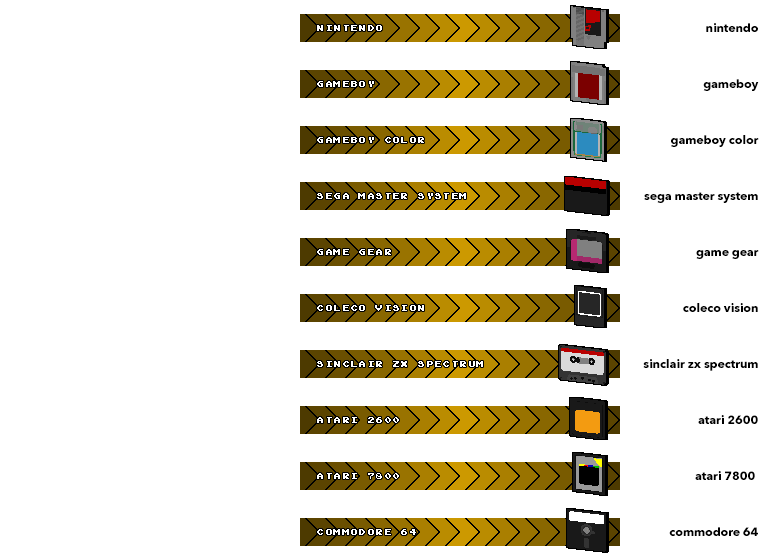
<style>
.page{position:relative;width:770px;height:560px;background:#ffffff}
.page>*{position:absolute;margin:0}
.t1{font:12px/56px "AvenirNext-Bold";color:#000000}
</style>
<div class="page">
<p class="t1" style="left:643px;top:23px;width:116px;height:513px;text-align:right">nintendo<br>gameboy<br>gameboy color<br>sega master system<br>game gear<br>coleco vision<br>sinclair zx spectrum<br>atari 2600<br>atari 7800 <br>commodore 64</p>
</div>
